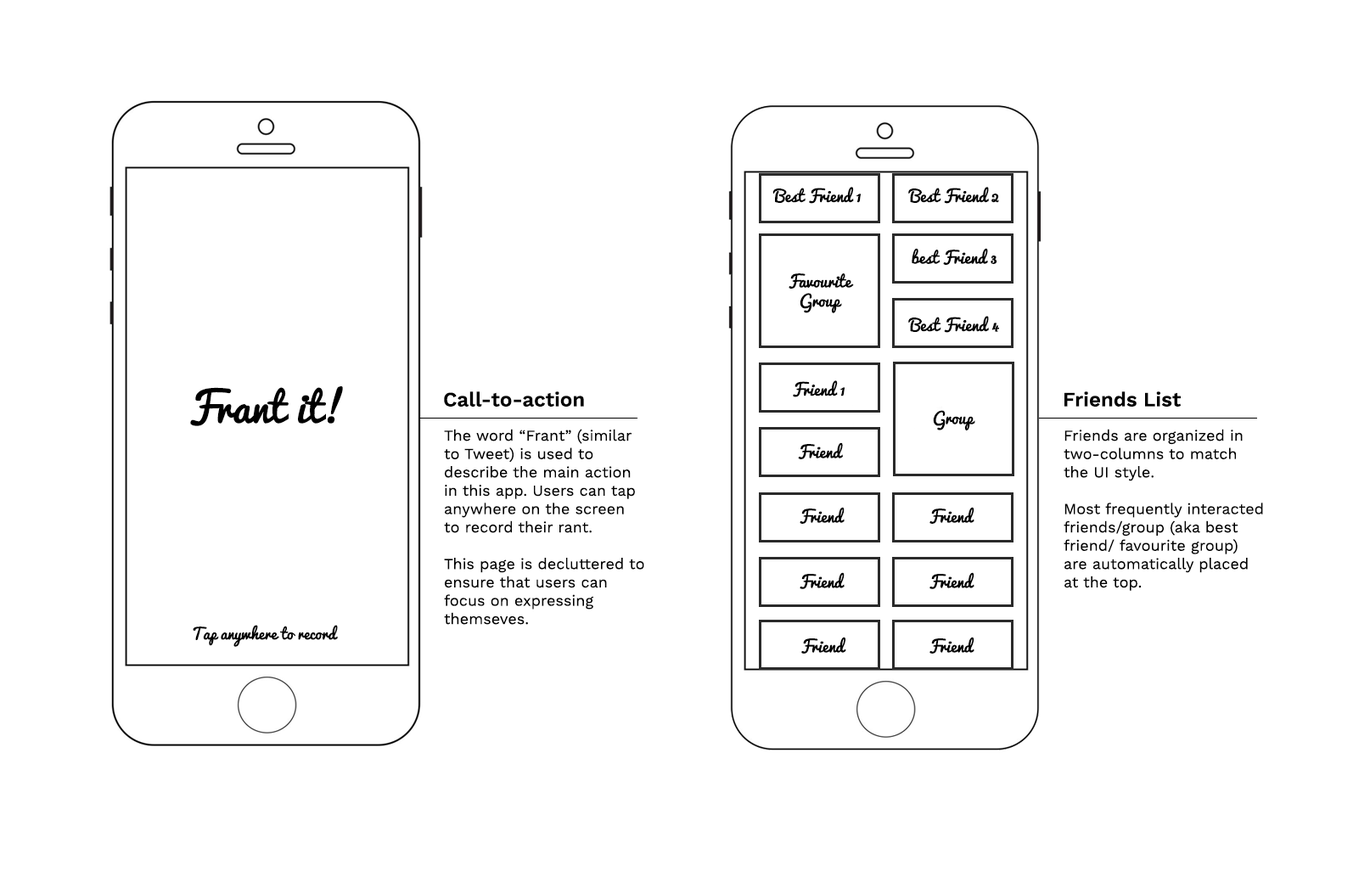
<style>
.page{position:relative;width:1370px;height:871px;background:#ffffff}
.page>*{position:absolute;margin:0}
.t1{font:16.1px "Pacifico-Regular";color:#000000}
.t2{font:40.7px "Pacifico-Regular";color:#000000}
.t3{font:20.4px "WorkSans-SemiBold";color:#000000}
.t4{font:15.3px "WorkSans-Regular";color:#000000}
.t5{font:15.3px "Pacifico-Regular";color:#000000}
</style>
<div class="page">
<p class="t1" style="left:772px;top:187px;width:88px;height:17px">Best Friend 1</p>
<p class="t1" style="left:908px;top:187px;width:91px;height:17px">Best Friend 2</p>
<p class="t1" style="left:911px;top:248px;width:86px;height:17px">best Friend 3</p>
<p class="t1" style="left:788px;top:273px;width:66px;height:40px;text-align:center">Favourite <br>Group</p>
<p class="t1" style="left:908px;top:316px;width:91px;height:17px">Best Friend 4</p>
<p class="t2" style="left:190px;top:386px;width:153px;height:40px">Frant it!</p>
<p class="t1" style="left:793px;top:380px;width:51px;height:17px">Friend 1</p>
<p class="t3" style="left:444px;top:391px;width:140px;height:15px">Call-to-action</p>
<p class="t3" style="left:1064px;top:391px;width:116px;height:15px">Friends List</p>
<p class="t1" style="left:933px;top:410px;width:42px;height:20px">Group</p>
<p class="t4" style="left:444px;top:429px;width:200px;height:196px">The word “Frant” (similar to Tweet) is used to describe the main action in this app. Users can tap anywhere on the screen to record their rant. <br><br>This page is decluttered to ensure that users can focus on expressing themseves.</p>
<p class="t4" style="left:1063px;top:429px;width:200px;height:162px">Friends are organized in two-columns to match the UI style. <br><br>Most frequently interacted friends/group (aka best friend/ favourite group) are automatically placed at the top.</p>
<p class="t1" style="left:798px;top:442px;width:45px;height:17px">Friend</p>
<p class="t1" style="left:799px;top:507px;width:45px;height:17px">Friend</p>
<p class="t1" style="left:929px;top:507px;width:45px;height:17px">Friend</p>
<p class="t1" style="left:799px;top:572px;width:45px;height:17px">Friend</p>
<p class="t1" style="left:929px;top:572px;width:45px;height:17px">Friend</p>
<p class="t5" style="left:193px;top:625px;width:145px;height:22px">Tap anywhere to record</p>
<p class="t1" style="left:801px;top:636px;width:45px;height:17px">Friend</p>
<p class="t1" style="left:929px;top:636px;width:45px;height:17px">Friend</p>
</div>
